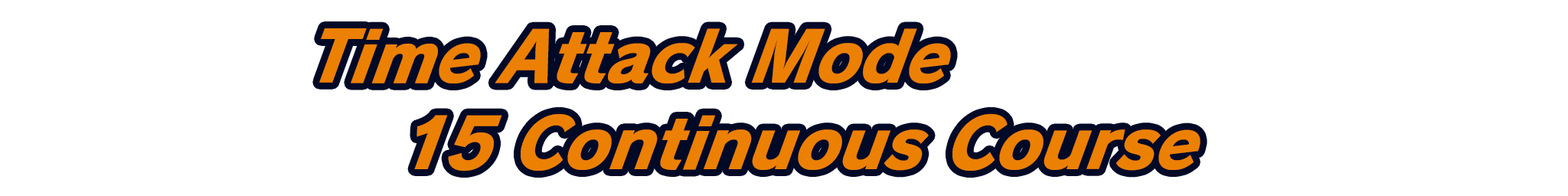
<style>
.page{position:relative;width:1568px;height:196px;background:#ffffff}
.page>*{position:absolute;margin:0}
.t1{font:73.5px "RodinPro-EB";letter-spacing:-0.015em;color:#ec8002;scale:0.94 1}
</style>
<div class="page">
<p class="t1" style="left:319px;top:28px;width:632px;height:55px">Time Attack Mode</p>
<p class="t1" style="left:414px;top:113px;width:786px;height:59px">15 Continuous Course</p>
</div>
